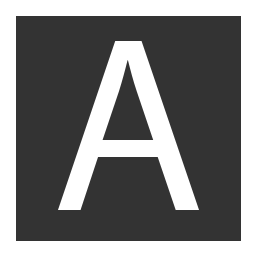
<style>
.page{position:relative;width:256px;height:256px;background:#333333}
.page>*{position:absolute;margin:0}
.t1{font:250px "MyriadPro-Regular";color:#ffffff}
</style>
<div class="page">
<p class="t1" style="left:58px;top:41px;width:141px;height:169px">A</p>
</div>
